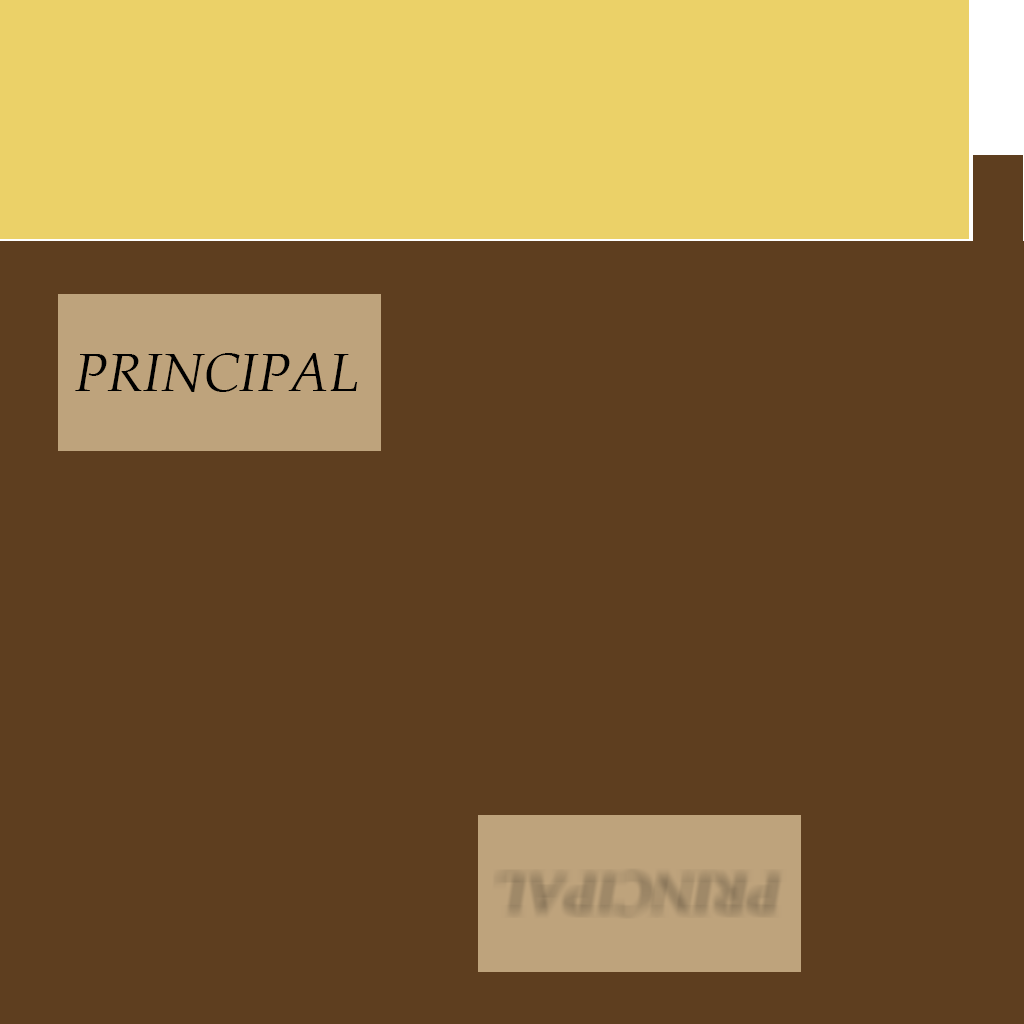
<style>
.page{position:relative;width:1024px;height:1024px;background:#5e3e1f}
.page>*{position:absolute;margin:0}
.t1{font:54.1px "BookAntiqua-Italic";color:#000000}
</style>
<div class="page">
<p class="t1" style="left:75px;top:353px;width:283px;height:39px">PRINCIPAL</p>
</div>
